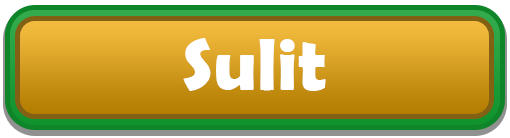
<style>
.page{position:relative;width:510px;height:138px}
.page>*{position:absolute;margin:0}
.t1{font:75px "BerlinSansFBDemi-Bold";color:#ffffff}
</style>
<div class="page">
<p class="t1" style="left:183px;top:38px;width:143px;height:53px">Sulit</p>
</div>
